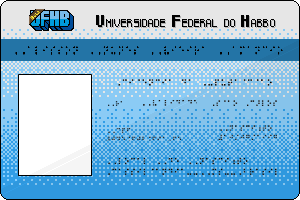
<style>
.page{position:relative;width:300px;height:200px}
.page>*{position:absolute;margin:0}
.t1{font:10px "Pixeled";letter-spacing:0.02em;color:#000000;font-variant:small-caps;font-weight:bold;scale:0.89 1}
</style>
<div class="page">
<p class="t1" style="left:96px;top:15px;width:179px;height:12px">Universidade Federal do Habbo</p>
</div>
